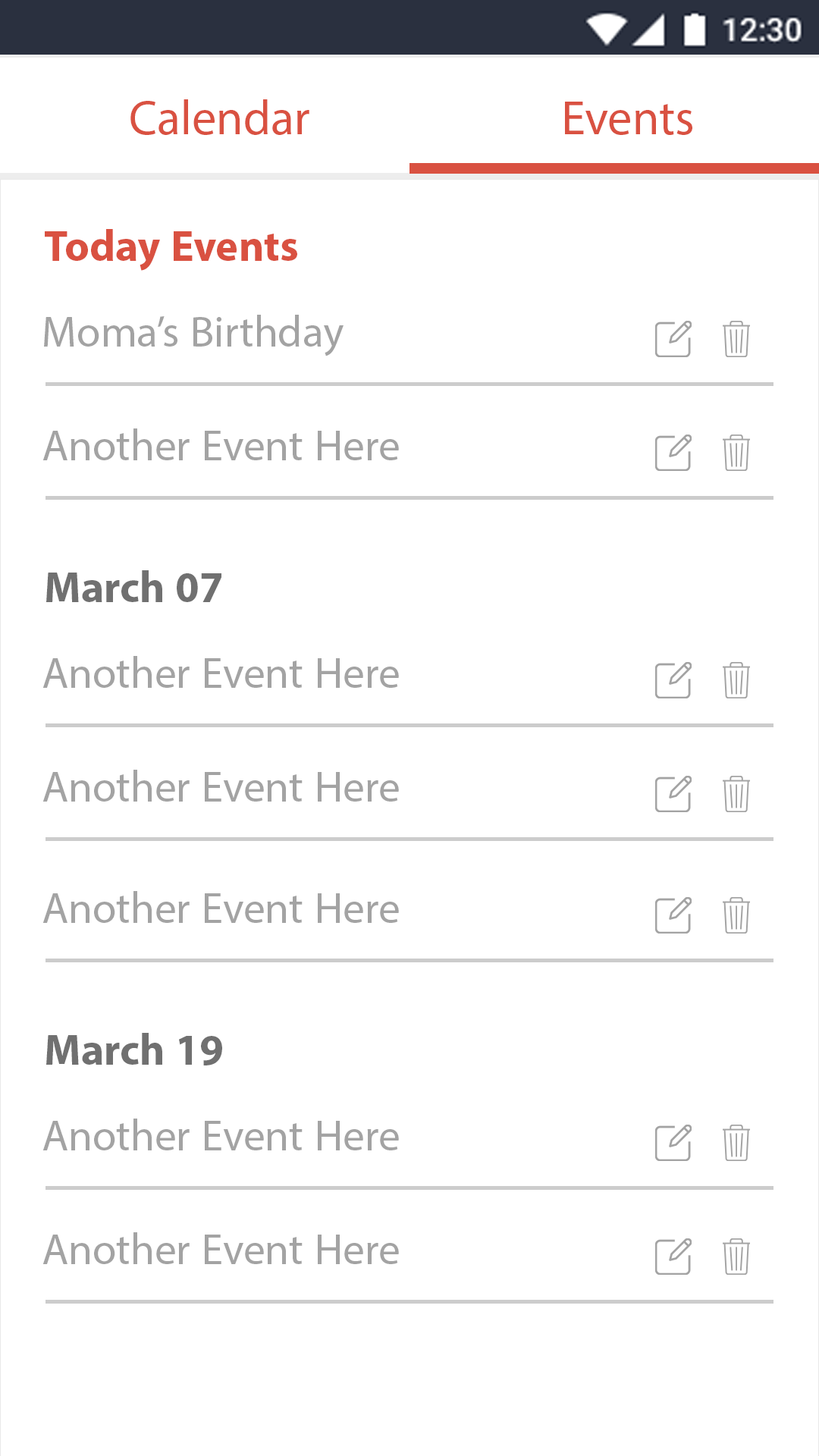
<style>
.page{position:relative;width:819px;height:1456px;background:#ffffff}
.page>*{position:absolute;margin:0}
.t1{font:68.2px "MyriadArabic-Regular";color:#d95141}
.t2{font:60.7px "MyriadArabic-Bold";color:#d95141}
.t3{font:60.7px "MyriadArabic-Regular";color:#a3a3a3}
.t4{font:60.7px "MyriadArabic-Bold";color:#707070}
</style>
<div class="page">
<p class="t1" style="left:130px;top:99px;width:179px;height:36px">Calendar</p>
<p class="t1" style="left:565px;top:102px;width:127px;height:33px">Events</p>
<p class="t2" style="left:45px;top:229px;width:252px;height:42px">Today Events</p>
<p class="t3" style="left:44px;top:315px;width:300px;height:41px">Moma’s Birthday</p>
<p class="t3" style="left:42px;top:428px;width:357px;height:32px">Another Event Here</p>
<p class="t4" style="left:46px;top:570px;width:175px;height:32px">March 07</p>
<p class="t3" style="left:42px;top:656px;width:357px;height:32px">Another Event Here</p>
<p class="t3" style="left:42px;top:770px;width:357px;height:32px">Another Event Here</p>
<p class="t3" style="left:42px;top:891px;width:357px;height:32px">Another Event Here</p>
<p class="t4" style="left:46px;top:1033px;width:176px;height:32px">March 19</p>
<p class="t3" style="left:42px;top:1119px;width:357px;height:31px">Another Event Here</p>
<p class="t3" style="left:42px;top:1232px;width:357px;height:32px">Another Event Here</p>
</div>
